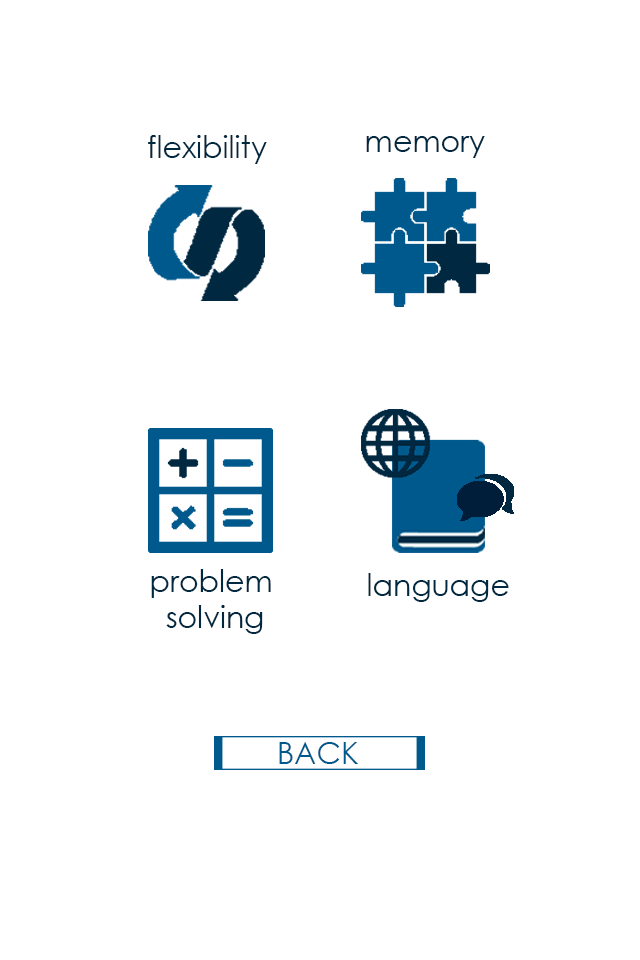
<style>
.page{position:relative;width:640px;height:960px;background:#ffffff}
.page>*{position:absolute;margin:0}
.t1{font:30px "CenturyGothic";color:#002841}
.t2{font:30px "CenturyGothic";color:#00598c}
</style>
<div class="page">
<p class="t1" style="left:148px;top:135px;width:119px;height:29px">flexibility</p>
<p class="t1" style="left:366px;top:136px;width:119px;height:22px">memory</p>
<p class="t1" style="left:151px;top:569px;width:120px;height:65px;text-align:center">problem <br>solving</p>
<p class="t1" style="left:368px;top:573px;width:141px;height:29px">language</p>
<p class="t2" style="left:279px;top:742px;width:79px;height:22px">BACK</p>
</div>
